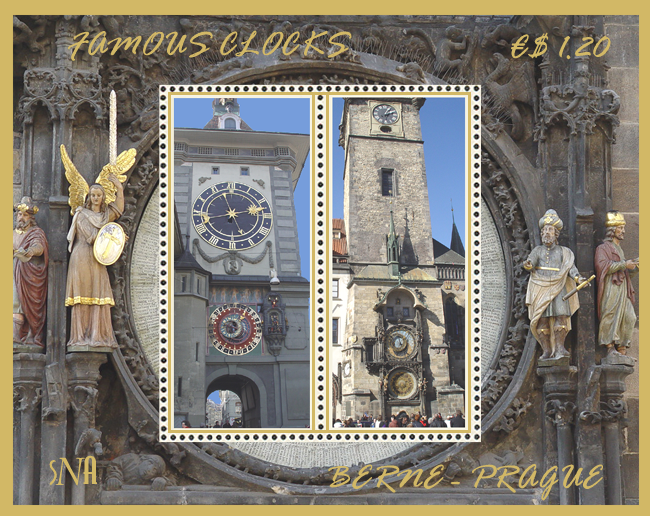
<style>
.page{position:relative;width:650px;height:516px}
.page>*{position:absolute;margin:0}
.t1{font:36px "RageItalic";color:#d2b866}
.t2{font:36px "RansomBold";color:#d2b866}
</style>
<div class="page">
<p class="t1" style="left:511px;top:32px;width:100px;height:28px">€$ 1.20</p>
<p class="t2" style="left:49px;top:455px;width:48px;height:31px">SNA</p>
<p class="t1" style="left:328px;top:464px;width:275px;height:37px">BERNE - PRAGUE</p>
</div>
